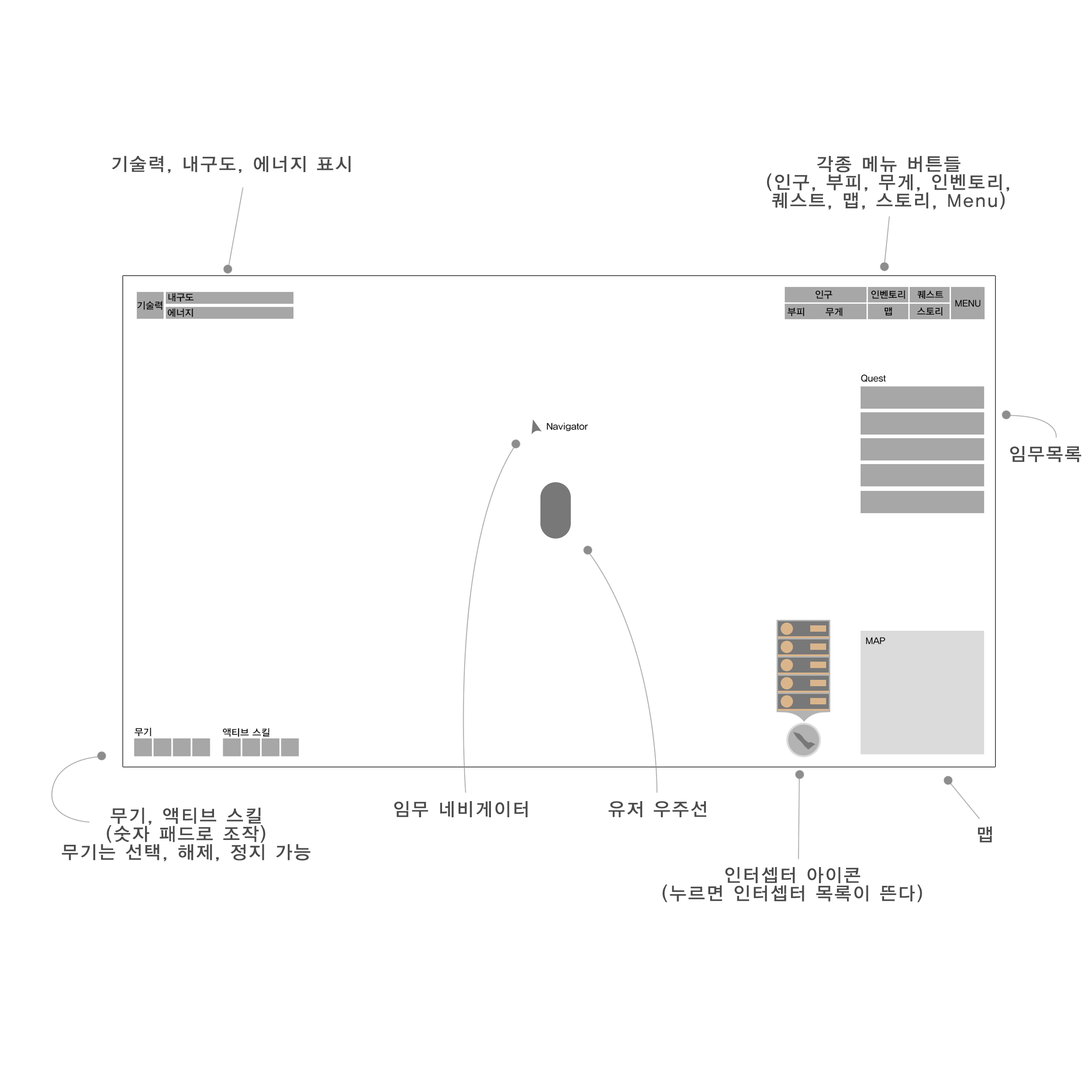
<style>
.page{position:relative;width:1092px;height:1092px;background:#ffffff}
.page>*{position:absolute;margin:0}
.t1{font:18.2px "YDIYGO330";letter-spacing:0.1em;color:#4c4c4c}
.t2{font:18.2px/18.2px "YDIYGO330";letter-spacing:0.1em;color:#4c4c4c}
</style>
<div class="page">
<p class="t1" style="left:112px;top:156px;width:239px;height:17px">기술력, 내구도, 에너지 표시</p>
<p class="t2" style="left:767px;top:156px;width:242px;height:54px;text-align:center">각종 메뉴 버튼들<br>(인구, 부피, 무게, 인벤토리,<br>퀘스트, 맵, 스토리, Menu)</p>
<p class="t1" style="left:1010px;top:446px;width:72px;height:16px">임무목록</p>
<p class="t2" style="left:62px;top:808px;width:249px;height:53px;text-align:center">무기, 액티브 스킬<br>(숫자 패드로 조작)<br>무기는 선택, 해제, 정지 가능</p>
<p class="t1" style="left:394px;top:801px;width:134px;height:16px">임무 네비게이터</p>
<p class="t1" style="left:608px;top:801px;width:98px;height:16px">유저 우주선</p>
<p class="t1" style="left:978px;top:826px;width:14px;height:17px">맵</p>
<p class="t2" style="left:663px;top:867px;width:259px;height:35px;text-align:center">인터셉터 아이콘<br>(누르면 인터셉터 목록이 뜬다)</p>
</div>
